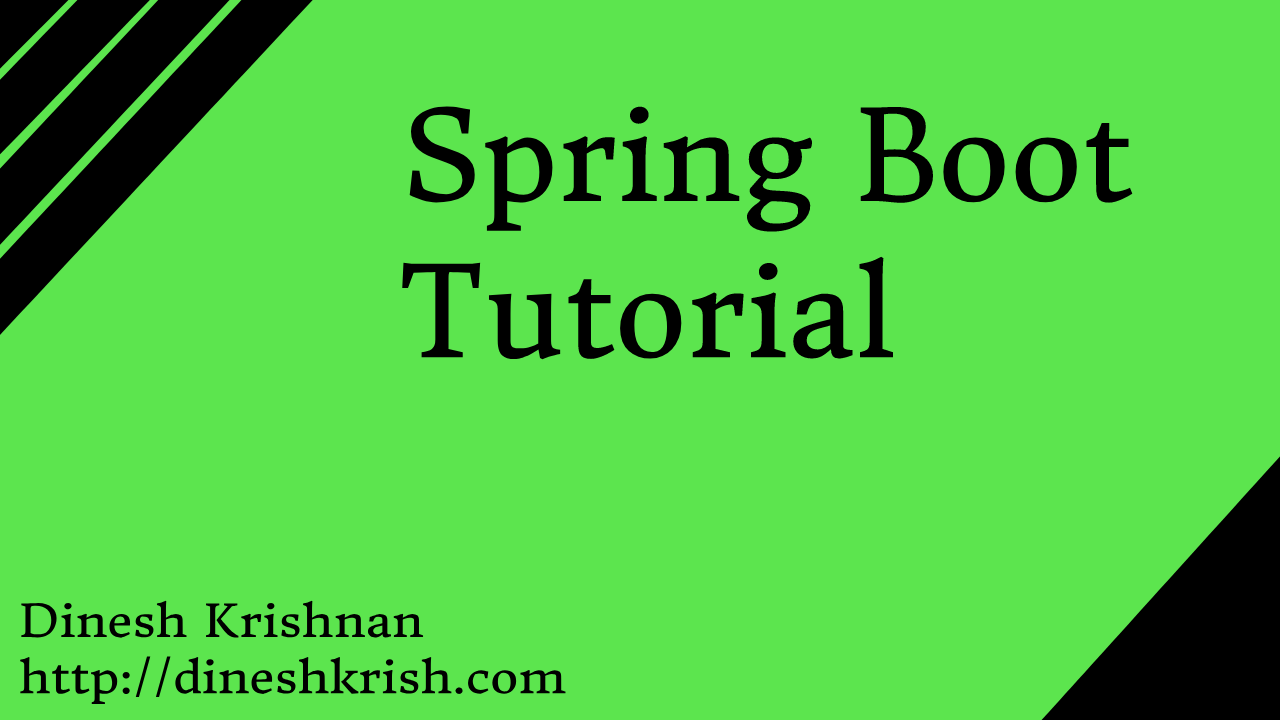
<style>
.page{position:relative;width:1280px;height:720px;background:#5ce54e}
.page>*{position:absolute;margin:0}
.t1{font:125px "DonegalOne-Regular";color:#000000}
.t2{font:45px "DonegalOne-Regular";color:#000000;scale:1.08 1}
</style>
<div class="page">
<p class="t1" style="left:402px;top:106px;width:731px;height:254px">Spring Boot<br>Tutorial</p>
<p class="t2" style="left:20px;top:600px;width:546px;height:104px">Dinesh Krishnan<br>http://dineshkrish.com</p>
</div>
